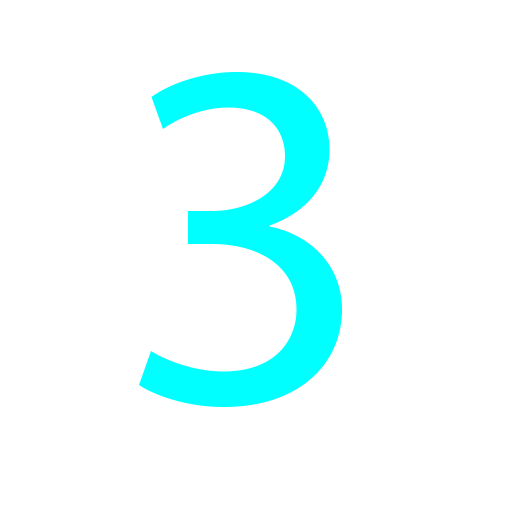
<style>
.page{position:relative;width:512px;height:512px;background:#ffffff}
.page>*{position:absolute;margin:0}
.t1{font:500px "MyriadPro-Regular";color:#00ffff}
</style>
<div class="page">
<p class="t1" style="left:139px;top:72px;width:203px;height:335px">3</p>
</div>
